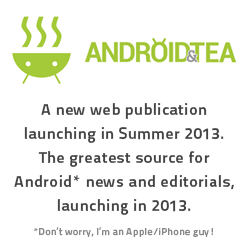
<style>
.page{position:relative;width:250px;height:250px;background:#ffffff}
.page>*{position:absolute;margin:0}
.t1{font:16px/24px "TitilliumText22L-Bold";letter-spacing:0.03em;color:#444444}
.t2{font:10px/24px "TitilliumText22L-Bold";letter-spacing:0.03em;color:#888888}
</style>
<div class="page">
<p class="t1" style="left:14px;top:103px;width:220px;height:134px;text-align:center">A new web publication launching in Summer 2013. The greatest source for Android* news and editorials, launching in 2013.<br><span class="t2">*Don’t worry, I’m an Apple/iPhone guy!</span></p>
</div>
